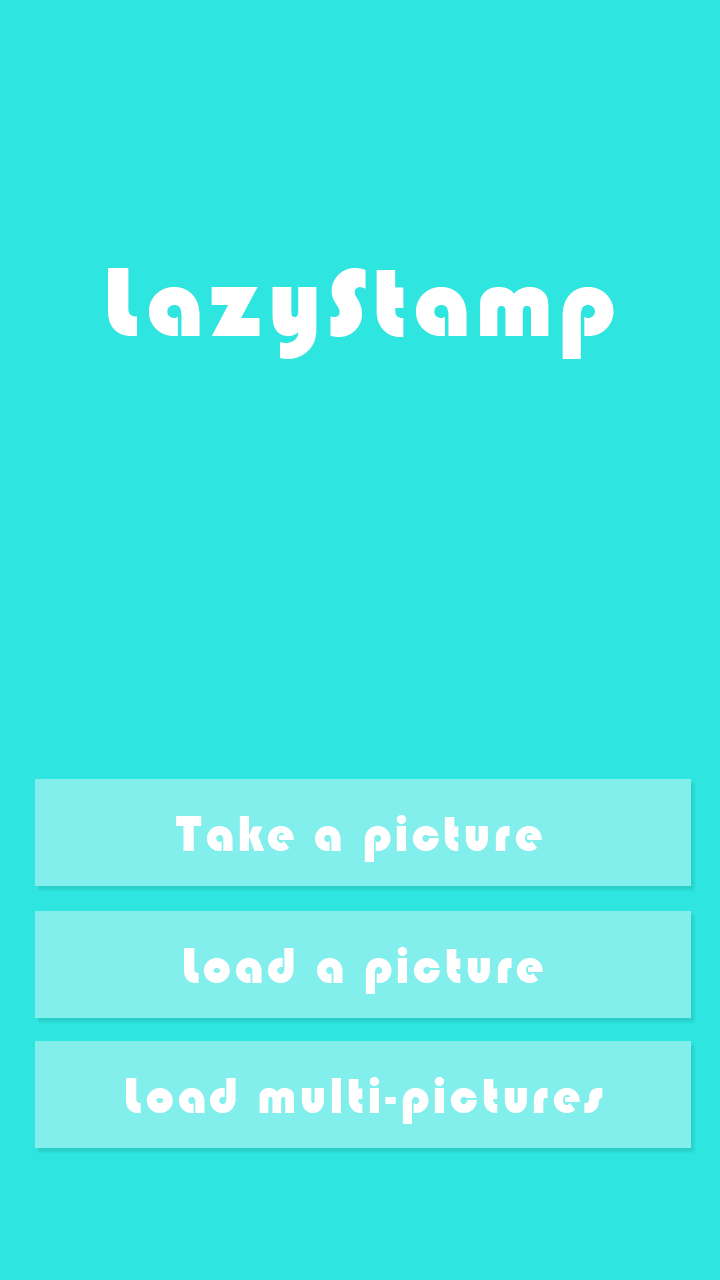
<style>
.page{position:relative;width:720px;height:1280px;background:#2ee5df}
.page>*{position:absolute;margin:0}
.t1{font:95px "Blippo-BlkBT";letter-spacing:0.08em;color:#ffffff}
.t2{font:48px "Blippo-BlkBT";letter-spacing:0.08em;color:#ffffff}
.t3{font:48px "Blippo-BlkBT";letter-spacing:0.08em;color:#ffffff;font-variant:small-caps}
</style>
<div class="page">
<p class="t1" style="left:108px;top:268px;width:506px;height:91px">LazyStamp</p>
<p class="t2" style="left:176px;top:815px;width:366px;height:47px"><span class="t3">T</span>ake a picture</p>
<p class="t2" style="left:184px;top:947px;width:359px;height:47px">Load a picture</p>
<p class="t2" style="left:126px;top:1077px;width:477px;height:47px">Load multi-pictures</p>
</div>
